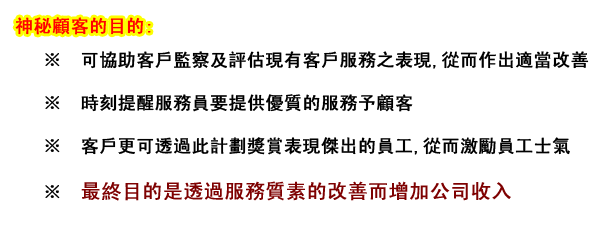
<style>
.page{position:relative;width:615px;height:227px;background:#ffffff}
.page>*{position:absolute;margin:0}
.t1{font:18px "SimHei";color:#ff0000;font-weight:bold}
.t2{font:18px "SimHei";color:#000000;font-weight:bold}
.t3{font:20px "SimHei";color:#7e0101;font-weight:bold}
</style>
<div class="page">
<p class="t1" style="left:15px;top:17px;width:136px;height:18px">神秘顧客的目的:</p>
<p class="t2" style="left:45px;top:51px;width:544px;height:150px">※  可協助客戶監察及評估現有客戶服務之表現,從而作出適當改善<br><br>※  時刻提醒服務員要提供優質的服務予顧客<br><br>※  客戶更可透過此計劃獎賞表現傑出的員工,從而激勵員工士氣<br><br>※  <span class="t3">最終目的是透過服務質素的改善而增加公司收入</span></p>
</div>
